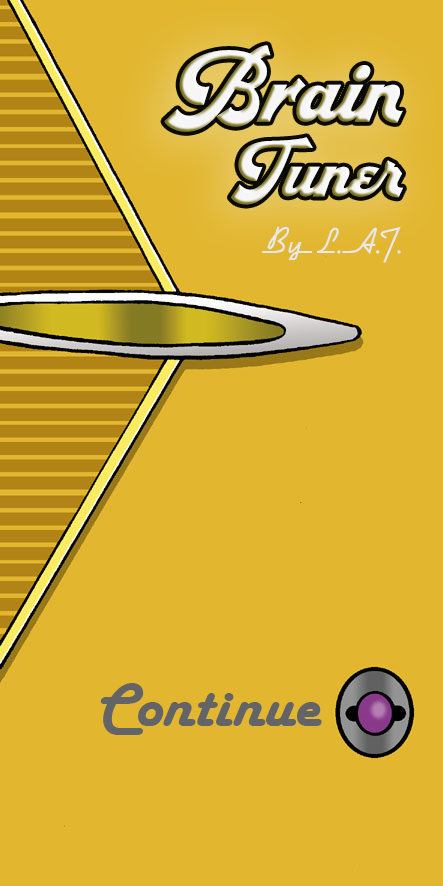
<style>
.page{position:relative;width:443px;height:886px;background:#e2b62f}
.page>*{position:absolute;margin:0}
.t1{font:80px/74.7px "RetrofunkScriptPersonalUse";color:#f6f6f6}
.t2{font:64px/74.7px "RetrofunkScriptPersonalUse";color:#f6f6f6}
.t3{font:40px "DymaxionScript";color:#e9e9e9}
.t4{font:64.7px "HarlowSolid";color:#636468}
</style>
<div class="page">
<p class="t1" style="left:164px;top:45px;width:239px;height:160px;text-align:right">Brain<br><span class="t2">Tuner</span></p>
<p class="t3" style="left:262px;top:226px;width:139px;height:37px">By L.A.T.</p>
<p class="t4" style="left:100px;top:683px;width:222px;height:52px">Continue</p>
</div>
